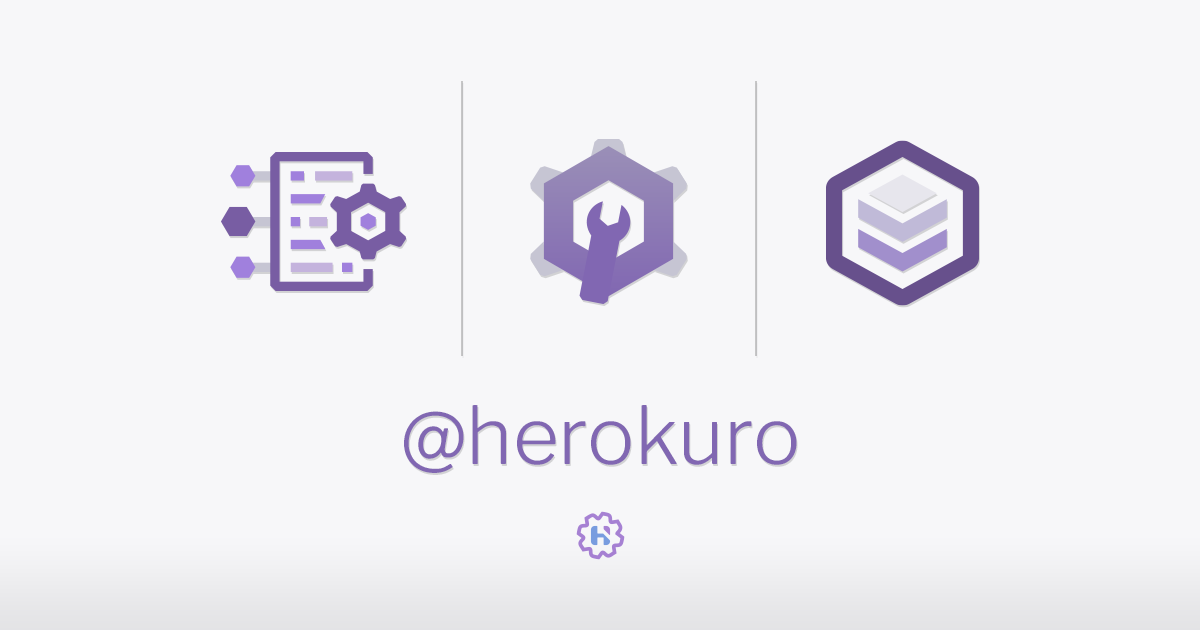
<style>
.page{position:relative;width:1200px;height:630px;background:#f7f7f9}
.page>*{position:absolute;margin:0}
.t1{font:79.3px "LibreFranklin-Light";color:#8167b2}
</style>
<div class="page">
<p class="t1" style="left:404px;top:405px;width:393px;height:68px">@herokuro</p>
</div>
